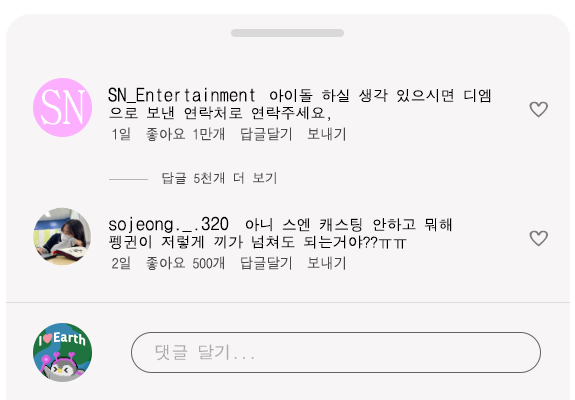
<style>
.page{position:relative;width:575px;height:400px;background:#f7f5f5}
.page>*{position:absolute;margin:0}
.t1{font:18.6px "DotumChe";color:#000000}
.t2{font:14.9px "DotumChe";color:#000000}
.t3{font:18px "DotumChe";color:#7d7d7d;scale:1.29 1}
.t4{font:14.8px "DotumChe";color:#494949;scale:0.91 1}
.t5{font:13px "DotumChe";color:#444444}
.t6{font:18.5px "DotumChe";color:#000000}
.t7{font:17.1px "DotumChe";color:#adacac}
</style>
<div class="page">
<p class="t1" style="left:108px;top:87px;width:147px;height:16px">SN_Entertainment</p>
<p class="t2" style="left:270px;top:89px;width:221px;height:14px">아이돌 하실 생각 있으시면 디엠</p>
<p class="t3" style="left:529px;top:101px;width:19px;height:17px">♡</p>
<p class="t2" style="left:109px;top:106px;width:221px;height:15px">으로 보낸 연락처로 연락주세요,</p>
<p class="t4" style="left:112px;top:127px;width:233px;height:14px">1일  좋아요 1만개  답글달기  보내기</p>
<p class="t5" style="left:162px;top:172px;width:114px;height:12px">답글 5천개 더 보기</p>
<p class="t6" style="left:109px;top:216px;width:120px;height:17px">sojeong._.320</p>
<p class="t2" style="left:246px;top:218px;width:206px;height:14px">아니 스엔 캐스팅 안하고 뭐해</p>
<p class="t3" style="left:529px;top:230px;width:19px;height:17px">♡</p>
<p class="t2" style="left:109px;top:235px;width:298px;height:15px">펭귄이 저렇게 끼가 넘쳐도 되는거야??ㅠㅠ</p>
<p class="t4" style="left:112px;top:256px;width:233px;height:14px">2일  좋아요 500개  답글달기  보내기</p>
<p class="t7" style="left:155px;top:344px;width:99px;height:17px">댓글 달기...</p>
</div>
